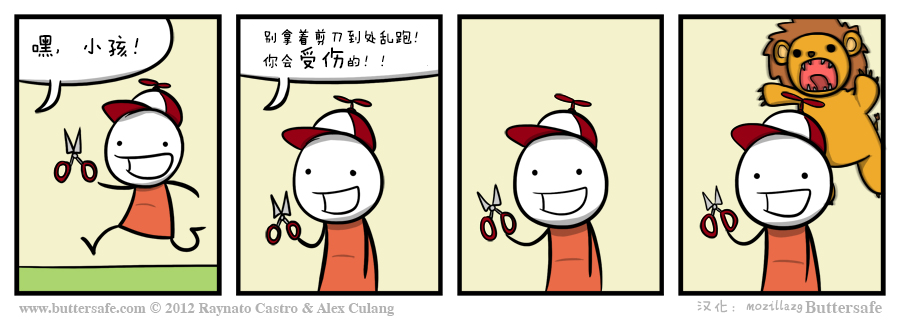
<style>
.page{position:relative;width:900px;height:325px;background:#f4f2cc}
.page>*{position:absolute;margin:0}
.t1{font:16.7px/16.7px "FZMWJW--GB1-0";color:#000000}
.t2{font:25px/16.7px "FZMWJW--GB1-0";color:#000000}
.t3{font:25px "FZMWJW--GB1-0";color:#000000}
.t4{font:16.7px "FZMWJW--GB1-0";color:#000000}
.t5{font:16.7px "FZMWJW--GB1-0";color:#b3b3b3}
</style>
<div class="page">
<p class="t1" style="left:263px;top:28px;width:155px;height:41px">别拿着剪刀到处乱跑！<br>你会<span class="t2">受伤</span>的！！</p>
<p class="t3" style="left:32px;top:35px;width:107px;height:22px"><span class="t4"> </span>嘿，小孩！</p>
<p class="t5" style="left:697px;top:299px;width:106px;height:14px">汉化：mozillazg</p>
</div>
